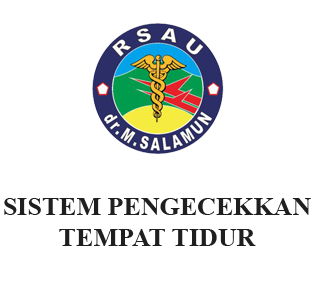
<style>
.page{position:relative;width:316px;height:289px;background:#ffffff}
.page>*{position:absolute;margin:0}
.t1{font:26px "TimesNewRomanPS-BoldMT";color:#1f1f1f}
</style>
<div class="page">
<p class="t1" style="left:4px;top:198px;width:307px;height:48px;text-align:center">SISTEM PENGECEKKAN<br>TEMPAT TIDUR</p>
</div>
